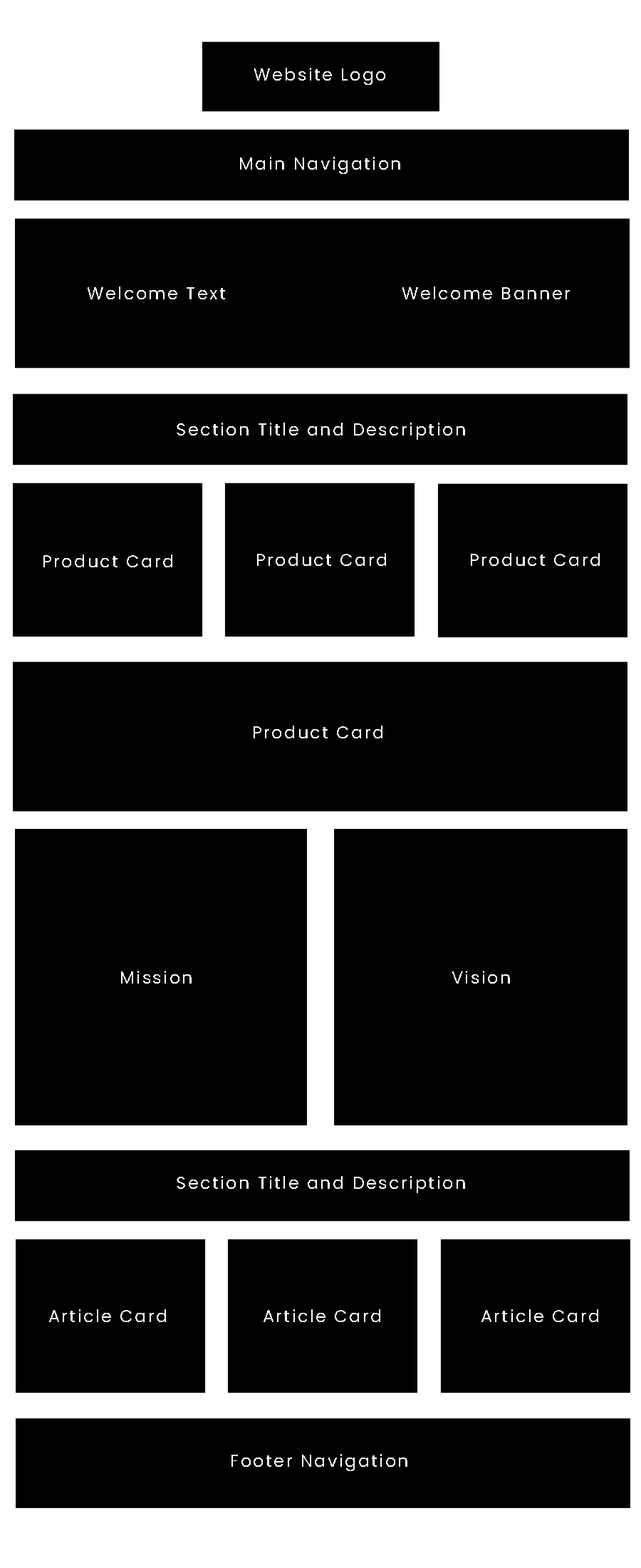
<style>
.page{position:relative;width:641px;height:1568px;background:#000000}
.page>*{position:absolute;margin:0}
.t1{font:17.1px "Poppins-Regular";letter-spacing:0.1em;color:#ffffff}
</style>
<div class="page">
<p class="t1" style="left:254px;top:68px;width:132px;height:17px">Website Logo</p>
<p class="t1" style="left:240px;top:157px;width:161px;height:17px">Main Navigation</p>
<p class="t1" style="left:88px;top:287px;width:137px;height:12px">Welcome Text</p>
<p class="t1" style="left:403px;top:287px;width:167px;height:12px">Welcome Banner</p>
<p class="t1" style="left:177px;top:423px;width:288px;height:17px">Section Title and Description</p>
<p class="t1" style="left:43px;top:555px;width:129px;height:12px">Product Card</p>
<p class="t1" style="left:257px;top:553px;width:129px;height:13px">Product Card</p>
<p class="t1" style="left:471px;top:553px;width:129px;height:13px">Product Card</p>
<p class="t1" style="left:254px;top:726px;width:129px;height:12px">Product Card</p>
<p class="t1" style="left:121px;top:971px;width:71px;height:13px">Mission</p>
<p class="t1" style="left:453px;top:971px;width:57px;height:13px">Vision</p>
<p class="t1" style="left:177px;top:1176px;width:288px;height:17px">Section Title and Description</p>
<p class="t1" style="left:49px;top:1309px;width:117px;height:13px">Article Card</p>
<p class="t1" style="left:264px;top:1309px;width:117px;height:13px">Article Card</p>
<p class="t1" style="left:482px;top:1309px;width:117px;height:13px">Article Card</p>
<p class="t1" style="left:232px;top:1454px;width:176px;height:17px">Footer Navigation</p>
</div>
